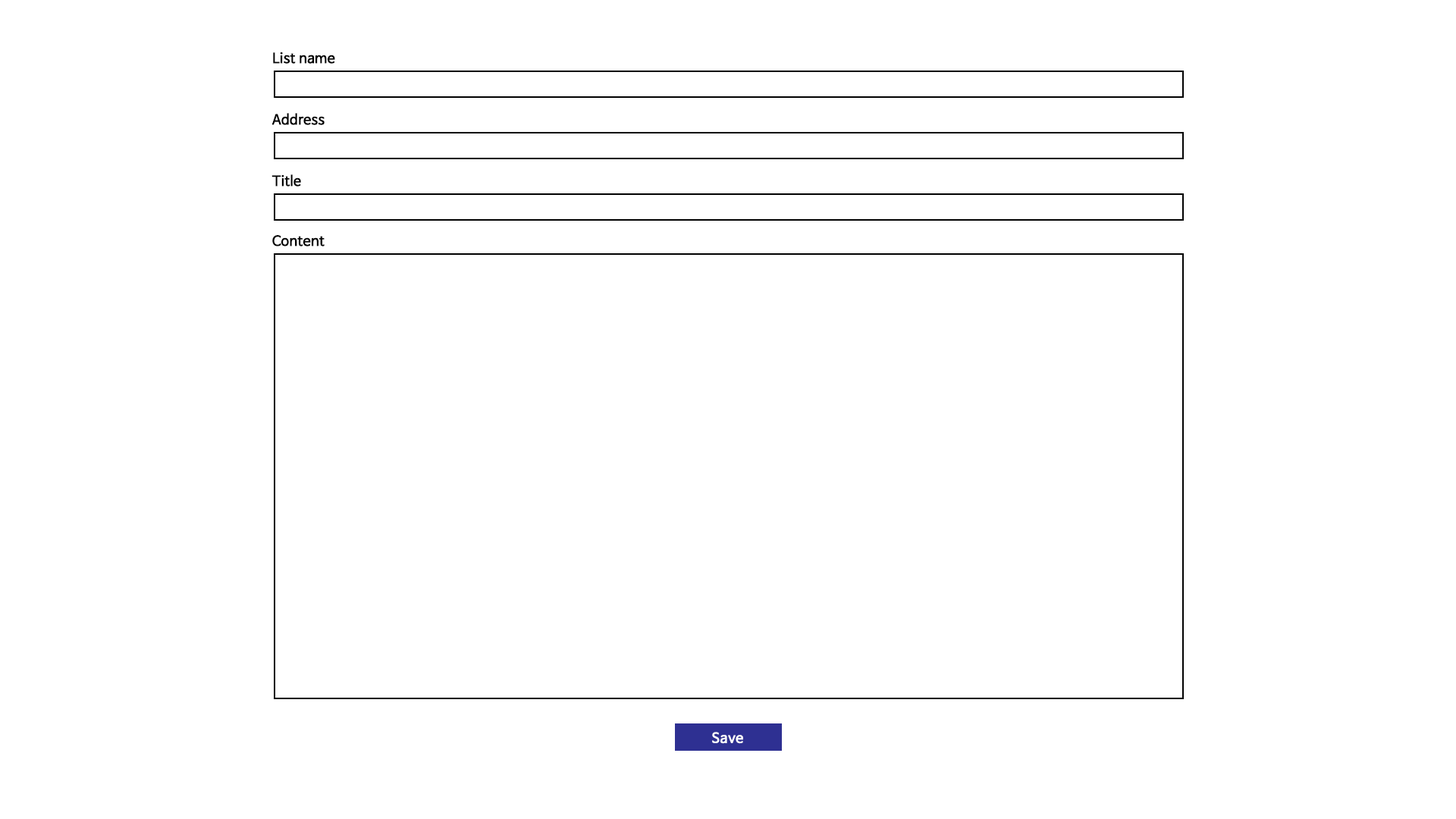
<style>
.page{position:relative;width:1456px;height:819px;background:#ffffff}
.page>*{position:absolute;margin:0}
.t1{font:13.6px "NanumBarunGothic";color:#000000;font-weight:bold}
.t2{font:13.6px "NanumBarunGothic";color:#ffffff;font-weight:bold}
</style>
<div class="page">
<p class="t1" style="left:273px;top:52px;width:62px;height:12px">List name</p>
<p class="t1" style="left:271px;top:113px;width:54px;height:12px">Address</p>
<p class="t1" style="left:271px;top:174px;width:30px;height:13px">Title</p>
<p class="t1" style="left:272px;top:235px;width:53px;height:11px">Content</p>
<p class="t2" style="left:712px;top:732px;width:31px;height:12px">Save</p>
</div>
